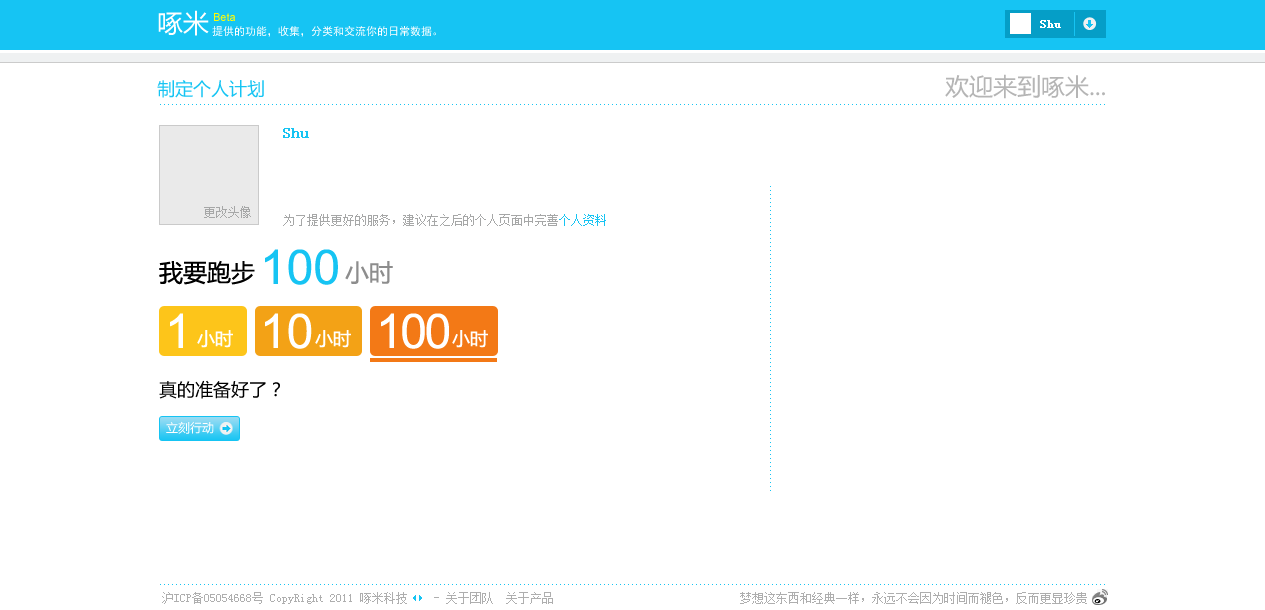
<style>
.page{position:relative;width:1265px;height:610px;background:#ffffff}
.page>*{position:absolute;margin:0}
.t1{font:26px "MicrosoftYaHei";color:#ffffff}
.t2{font:11px "ArialMT";color:#fffc04}
.t3{font:11px "SimHei";color:#ffffff}
.t4{font:12px "NSimSun";color:#ffffff;font-weight:bold}
.t5{font:24px "MicrosoftYaHei";color:#b5b5b5}
.t6{font:18px "MicrosoftYaHei";color:#16c4f3}
.t7{font:15px "NSimSun";color:#16c4f3;font-weight:bold}
.t8{font:12px "NSimSun";color:#a6a7a7}
.t9{font:12px "NSimSun";color:#16c4f3}
.t10{font:48px "ArialMT";color:#16c4f3}
.t11{font:24px "MicrosoftYaHei";color:#000000}
.t12{font:24px "MicrosoftYaHei";color:#8d8d8d}
.t13{font:48px "ArialMT";color:#ffffff}
.t14{font:48px "ArialMT";letter-spacing:-0.05em;color:#ffffff}
.t15{font:18px "MicrosoftYaHei";color:#ffffff}
.t16{font:18px "MicrosoftYaHei";color:#000000}
.t17{font:12px "MicrosoftYaHei";color:#ffffff}
.t18{font:12px "NSimSun";color:#aeaeae}
</style>
<div class="page">
<p class="t1" style="left:158px;top:10px;width:51px;height:26px">啄米</p>
<p class="t2" style="left:214px;top:13px;width:21px;height:8px">Beta</p>
<p class="t3" style="left:212px;top:26px;width:224px;height:11px">提供的功能，收集，分类和交流你的日常数据。</p>
<p class="t4" style="left:1040px;top:20px;width:21px;height:8px">Shu</p>
<p class="t5" style="left:945px;top:74px;width:160px;height:25px">欢迎来到啄米...</p>
<p class="t6" style="left:157px;top:80px;width:107px;height:18px">制定个人计划</p>
<p class="t7" style="left:283px;top:128px;width:26px;height:10px">Shu</p>
<p class="t8" style="left:204px;top:206px;width:47px;height:12px">更改头像</p>
<p class="t8" style="left:283px;top:214px;width:323px;height:12px">为了提供更好的服务，建议在之后的个人页面中完善<span class="t9">个人资料</span></p>
<p class="t10" style="left:265px;top:249px;width:73px;height:36px">100</p>
<p class="t11" style="left:159px;top:260px;width:96px;height:25px">我要跑步</p>
<p class="t12" style="left:345px;top:261px;width:48px;height:23px">小时</p>
<p class="t13" style="left:170px;top:313px;width:13px;height:35px">1</p>
<p class="t13" style="left:265px;top:313px;width:47px;height:36px">10</p>
<p class="t14" style="left:381px;top:313px;width:68px;height:36px">100</p>
<p class="t15" style="left:197px;top:330px;width:36px;height:18px">小时</p>
<p class="t15" style="left:315px;top:330px;width:36px;height:18px">小时</p>
<p class="t15" style="left:452px;top:330px;width:36px;height:18px">小时</p>
<p class="t16" style="left:159px;top:380px;width:121px;height:19px">真的准备好了？</p>
<p class="t17" style="left:166px;top:421px;width:48px;height:13px">立刻行动</p>
<p class="t18" style="left:162px;top:592px;width:245px;height:12px">沪ICP备05054668号 CopyRight 2011 啄米科技</p>
<p class="t18" style="left:434px;top:592px;width:119px;height:12px">- 关于团队  关于产品</p>
<p class="t18" style="left:740px;top:592px;width:347px;height:12px">梦想这东西和经典一样，永远不会因为时间而褪色，反而更显珍贵</p>
</div>
